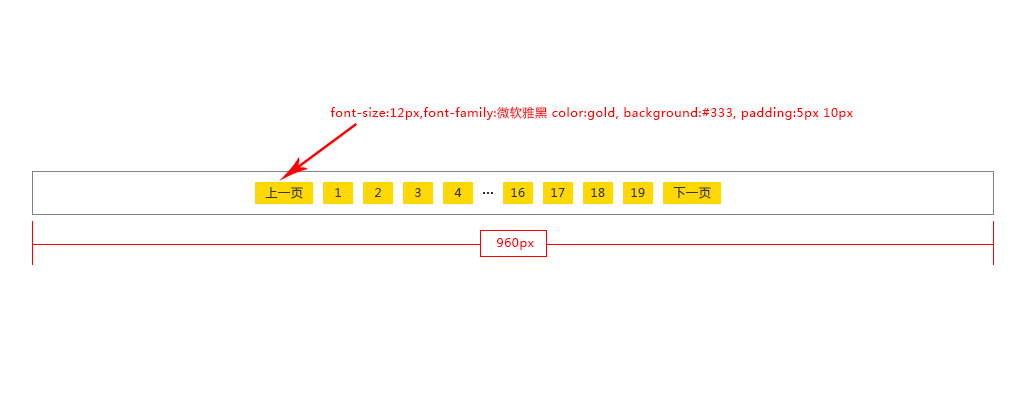
<style>
.page{position:relative;width:1024px;height:412px;background:#ffffff}
.page>*{position:absolute;margin:0}
.t1{font:12px "MicrosoftYaHei";letter-spacing:0.05em;color:#ff0000}
.t2{font:12px "MicrosoftYaHei";letter-spacing:0.05em;color:#333333}
</style>
<div class="page">
<p class="t1" style="left:330px;top:106px;width:523px;height:14px">font-size:12px,font-family:微软雅黑 color:gold, background:#333, padding:5px 10px</p>
<p class="t2" style="left:265px;top:187px;width:38px;height:12px">上一页</p>
<p class="t2" style="left:335px;top:188px;width:6px;height:9px">1</p>
<p class="t2" style="left:375px;top:188px;width:6px;height:9px">2</p>
<p class="t2" style="left:415px;top:188px;width:6px;height:9px">3</p>
<p class="t2" style="left:454px;top:188px;width:8px;height:9px">4</p>
<p class="t2" style="left:483px;top:192px;width:10px;height:2px">...</p>
<p class="t2" style="left:511px;top:188px;width:14px;height:9px">16</p>
<p class="t2" style="left:551px;top:188px;width:14px;height:9px">17</p>
<p class="t2" style="left:591px;top:188px;width:14px;height:9px">18</p>
<p class="t2" style="left:631px;top:188px;width:14px;height:9px">19</p>
<p class="t2" style="left:673px;top:187px;width:38px;height:12px">下一页</p>
<p class="t1" style="left:497px;top:238px;width:37px;height:12px">960px</p>
</div>
